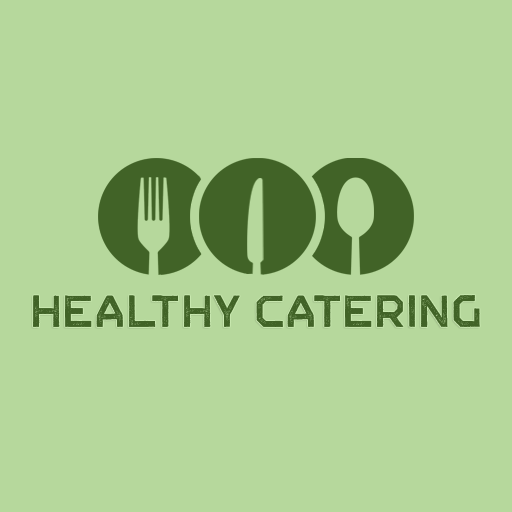
<style>
.page{position:relative;width:512px;height:512px;background:#b6d89c}
.page>*{position:absolute;margin:0}
.t1{font:80px "GEIR";color:#416327}
</style>
<div class="page">
<p class="t1" style="left:33px;top:295px;width:447px;height:32px">HEALTHY CATERING</p>
</div>
